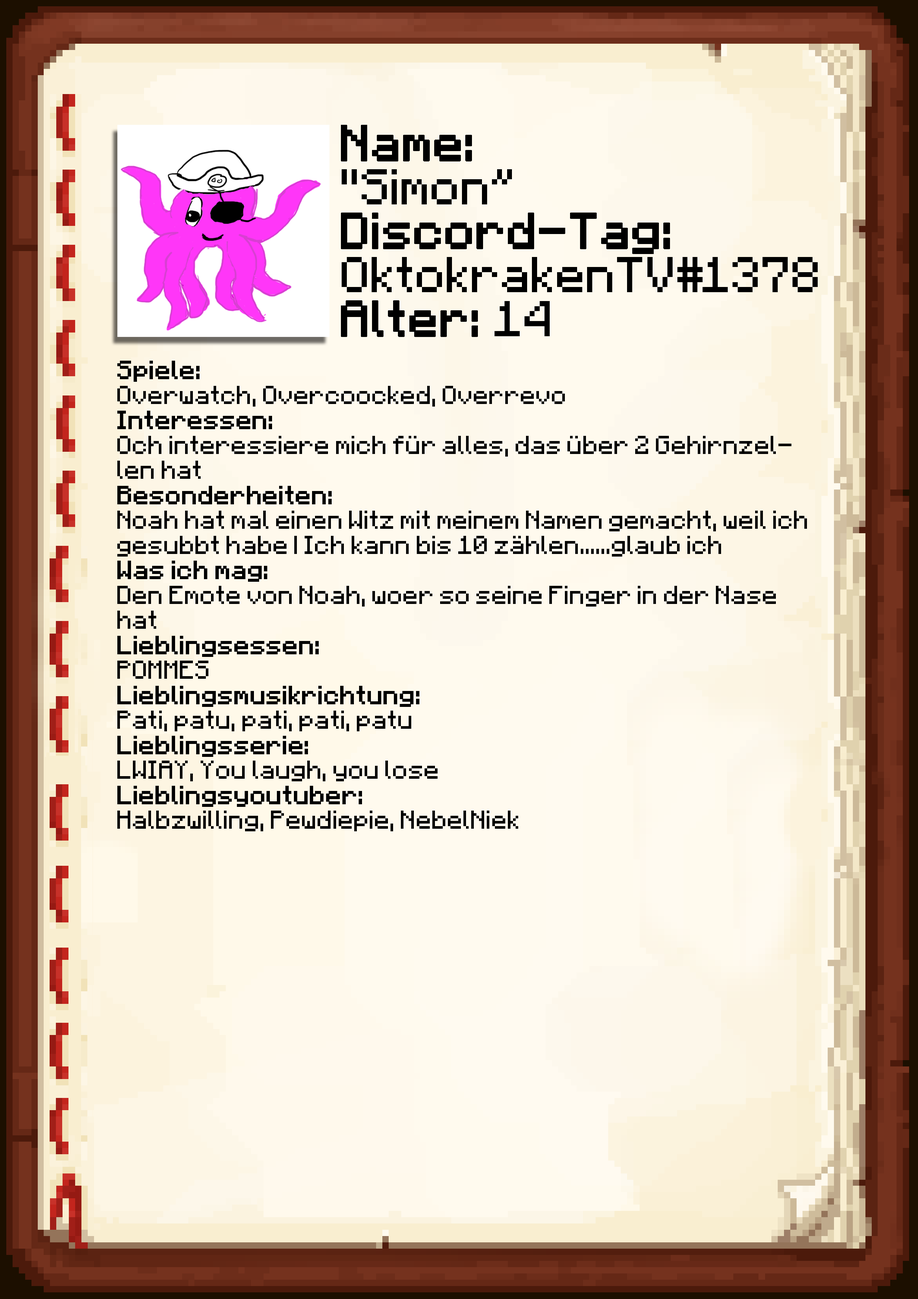
<style>
.page{position:relative;width:918px;height:1299px}
.page>*{position:absolute;margin:0}
.t1{font:40.1px/43.9px "Minecraft";color:#000000}
.t2{font:40.1px/43.9px "Minecraft";color:#000000;font-weight:bold}
.t3{font:20.8px "Minecraft";color:#000000}
.t4{font:20.8px "Minecraft";color:#000000;font-weight:bold}
</style>
<div class="page">
<p class="t1" style="left:341px;top:125px;width:477px;height:212px"><span class="t2">Name:<br></span>"Simon”<br><span class="t2">Discord-Tag:<br></span>OktokrakenTV#1378<br><span class="t2">Alter: </span>14</p>
<p class="t3" style="left:117px;top:361px;width:690px;height:470px"><span class="t4">Spiele: <br></span>Overwatch, Overcoocked, Overrevo<br><span class="t4">Interessen:<br></span>Och interessiere mich für alles, das über 2 Gehirnzellen hat<br><span class="t4">Besonderheiten:</span><br>Noah hat mal einen Witz mit meinem Namen gemacht, weil ich gesubbt habe | Ich kann bis 10 zählen......glaub ich<br><span class="t4">Was ich mag:<br></span>Den Emote von Noah, woer so seine Finger in der Nase hat<br><span class="t4">Lieblingsessen:<br></span>POMMES<br><span class="t4">Lieblingsmusikrichtung:<br></span>Pati, patu, pati, pati, patu<br><span class="t4">Lieblingsserie:<br></span>LWIAY, You laugh, you lose<br><span class="t4">Lieblingsyoutuber:<br></span>Halbzwilling, Pewdiepie, NebelNiek</p>
</div>
